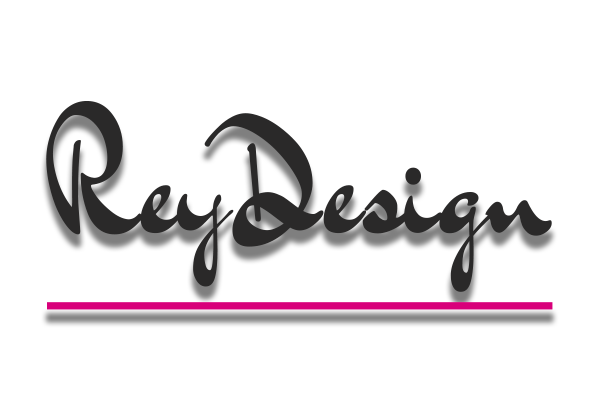
<style>
.page{position:relative;width:600px;height:400px;background:#ffffff}
.page>*{position:absolute;margin:0}
.t1{font:144px "DrSugiyama-Regular";color:#2a2929}
</style>
<div class="page">
<p class="t1" style="left:46px;top:101px;width:506px;height:191px">ReyDesign</p>
</div>
